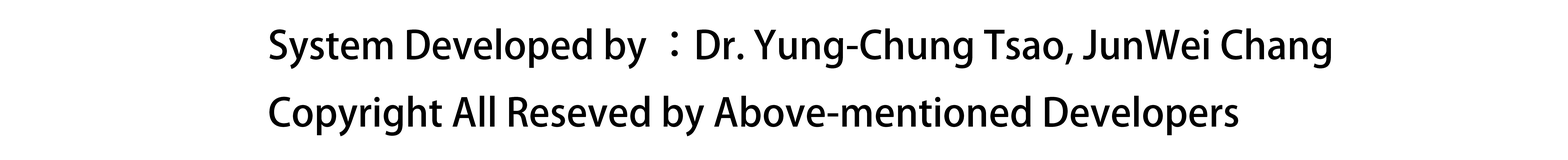
<style>
.page{position:relative;width:1568px;height:160px;background:#ffffff}
.page>*{position:absolute;margin:0}
.t1{font:38.6px "AdobeFanHeitiStd-Bold";color:#000000}
</style>
<div class="page">
<p class="t1" style="left:269px;top:28px;width:1062px;height:109px">System Developed by ：Dr. Yung-Chung Tsao, JunWei Chang<br>Copyright All Reseved by Above-mentioned Developers</p>
</div>
